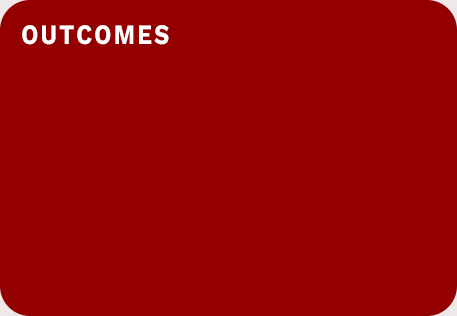
<style>
.page{position:relative;width:457px;height:316px;background:#940000}
.page>*{position:absolute;margin:0}
.t1{font:28.2px "WorkSansRoman-Bold";letter-spacing:0.1em;color:#ffffff;scale:0.82 1}
</style>
<div class="page">
<p class="t1" style="left:22px;top:25px;width:147px;height:20px">OUTCOMES</p>
</div>
